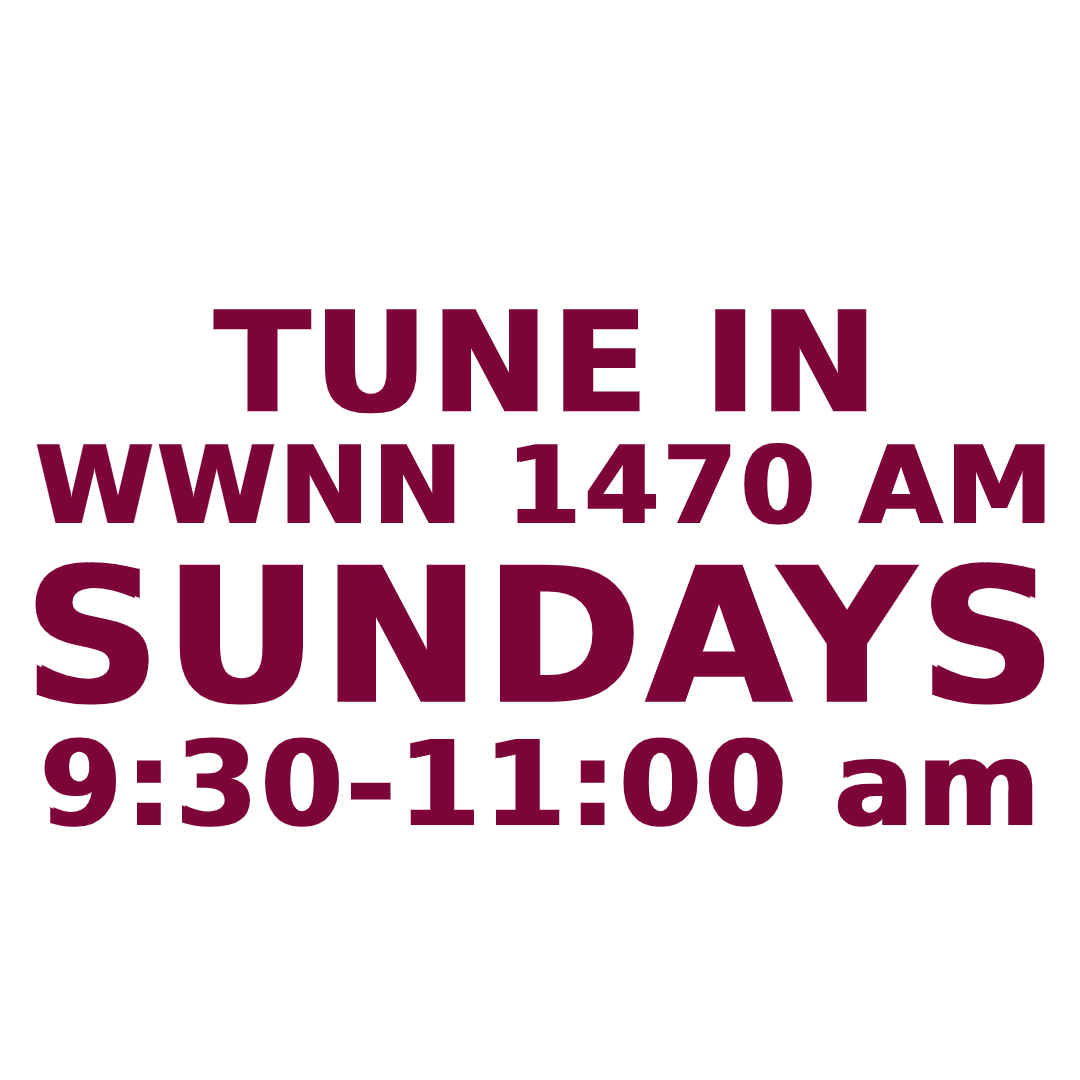
<style>
.page{position:relative;width:1080px;height:1080px;background:#ffffff}
.page>*{position:absolute;margin:0}
.t1{font:140px "Arial-Black";color:#7d0439;font-weight:bold}
.t2{font:108px "Arial-Black";color:#7d0439;font-weight:bold}
.t3{font:188px "Arial-Black";color:#7d0439;font-weight:bold}
.t4{font:118px "Arial-Black";color:#7d0439;font-weight:bold}
</style>
<div class="page">
<p class="t1" style="left:213px;top:309px;width:654px;height:105px">TUNE IN</p>
<p class="t2" style="left:36px;top:442px;width:1009px;height:83px">WWNN 1470 AM</p>
<p class="t3" style="left:35px;top:562px;width:1010px;height:143px">SUNDAYS</p>
<p class="t4" style="left:44px;top:737px;width:989px;height:90px">9:30-11:00 am</p>
</div>
